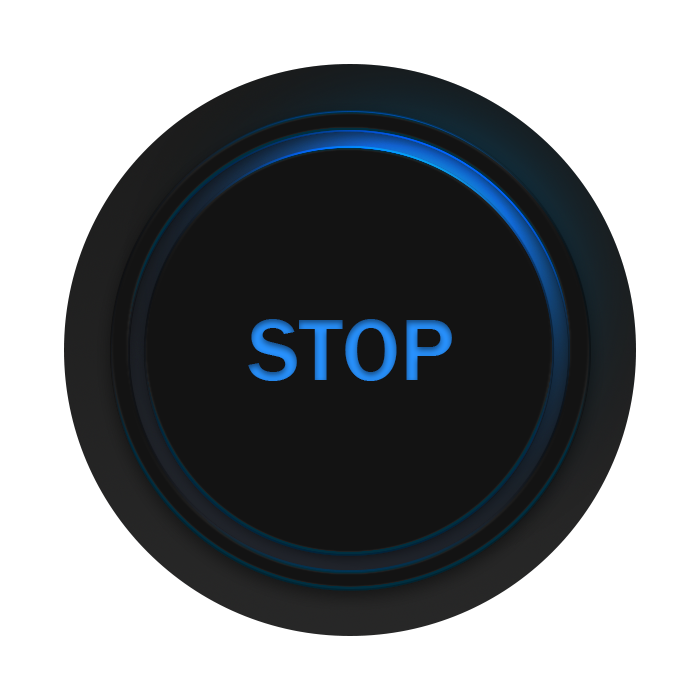
<style>
.page{position:relative;width:700px;height:700px;background:#ffffff}
.page>*{position:absolute;margin:0}
.t1{font:90px "FranklinGothic-Medium"}
</style>
<div class="page">
<p class="t1" style="left:248px;top:319px;width:204px;height:62px">STOP</p>
</div>
